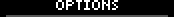
<style>
.page{position:relative;width:174px;height:17px;background:#000000}
.page>*{position:absolute;margin:0}
.t1{font:10px "Pixel";letter-spacing:0.005em;color:#ffffff}
</style>
<div class="page">
<p class="t1" style="left:56px;top:0px;width:62px;height:10px">options</p>
</div>
